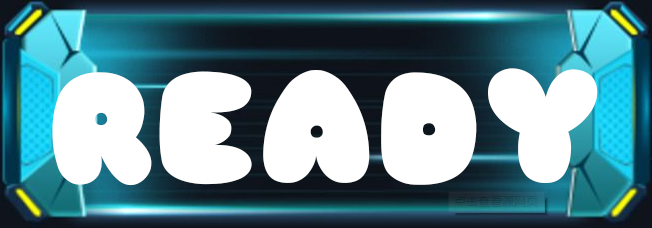
<style>
.page{position:relative;width:652px;height:228px;background:#ffffff}
.page>*{position:absolute;margin:0}
.t1{font:155.9px "Sniglet";color:#ffffff;font-variant:small-caps}
</style>
<div class="page">
<p class="t1" style="left:52px;top:68px;width:546px;height:118px">READY</p>
</div>
